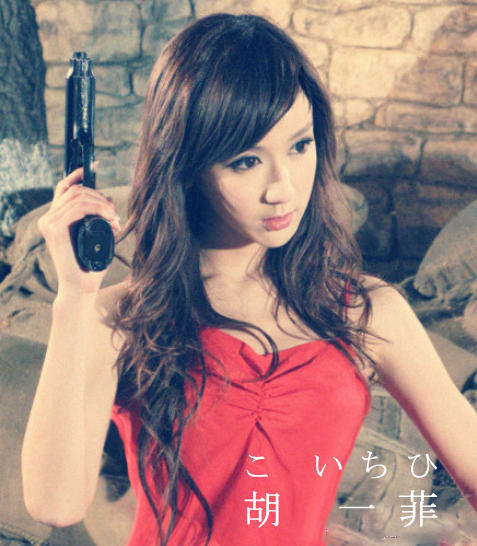
<style>
.page{position:relative;width:477px;height:546px}
.page>*{position:absolute;margin:0}
.t1{font:32px "MS-PMincho";letter-spacing:0.5em;color:#ffffff;font-weight:bold}
.t2{font:40px "MS-PMincho";letter-spacing:0.5em;color:#ffffff;font-weight:bold}
</style>
<div class="page">
<p class="t1" style="left:246px;top:451px;width:191px;height:28px">こ いちひ</p>
<p class="t2" style="left:244px;top:490px;width:194px;height:38px">胡 一菲</p>
</div>
